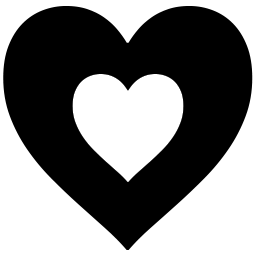
<style>
.page{position:relative;width:256px;height:256px;background:#000000}
.page>*{position:absolute;margin:0}
.t1{font:418.6px "WeblySleekUISemibold";letter-spacing:-0.02em;color:#000000}
.t2{font:185.5px "WeblySleekUISemibold";letter-spacing:-0.02em;color:#ffffff}
</style>
<div class="page">
<p class="t1" style="left:3px;top:6px;width:250px;height:244px">♥</p>
<p class="t2" style="left:72px;top:74px;width:112px;height:108px">♥</p>
</div>
